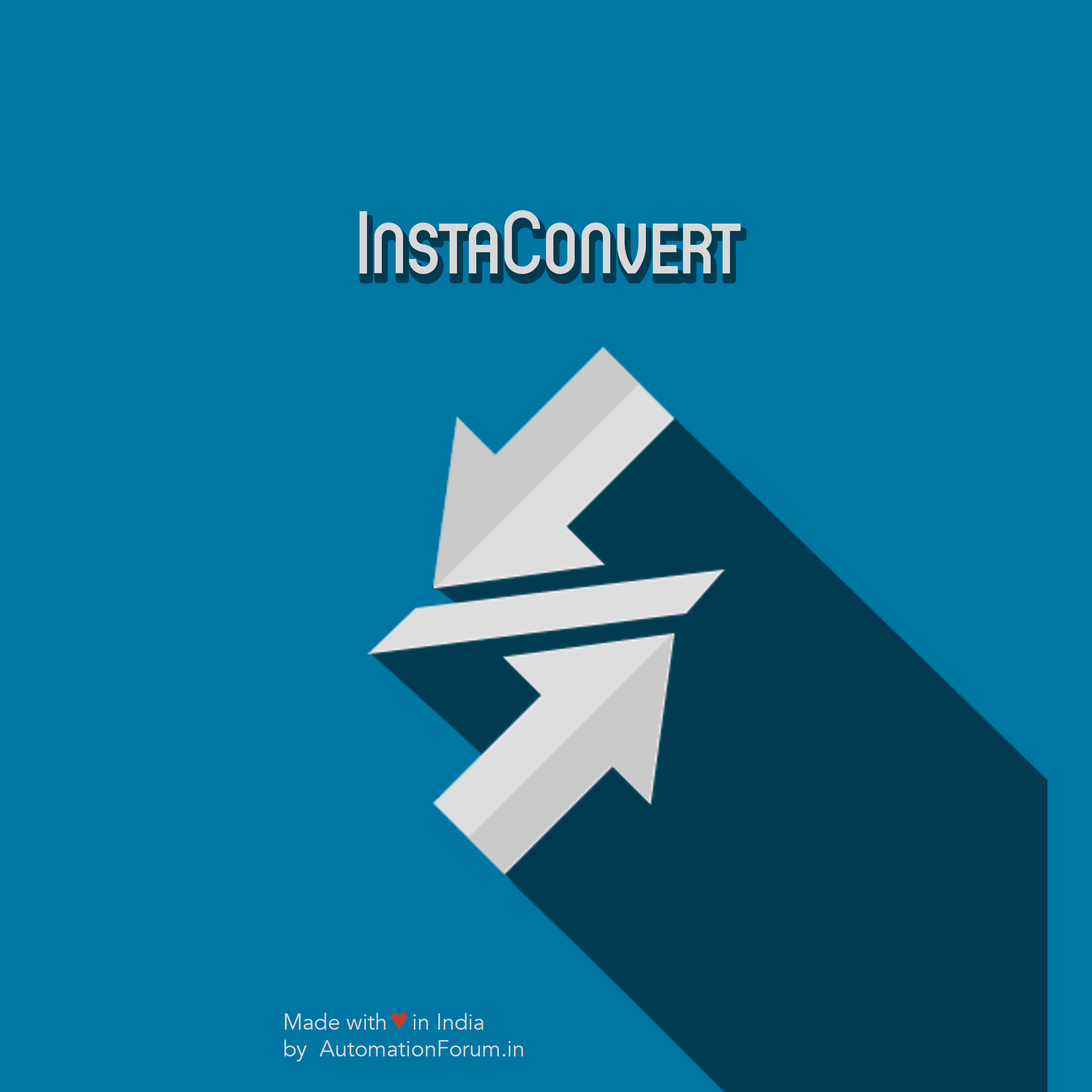
<style>
.page{position:relative;width:1092px;height:1092px;background:#0076a3}
.page>*{position:absolute;margin:0}
.t1{font:89px "Circula-Medium";color:#d8d8d8}
.t2{font:22.3px "Avenir-Book";color:#d8d8d8}
.t3{font:29.7px "ArialMT";color:#bb4031}
</style>
<div class="page">
<p class="t1" style="left:360px;top:210px;width:381px;height:64px">InstaConvert</p>
<p class="t2" style="left:284px;top:1013px;width:239px;height:48px">Made with    in India <br>by  AutomationForum.in</p>
<p class="t3" style="left:391px;top:1012px;width:16px;height:19px">♥︎</p>
</div>
